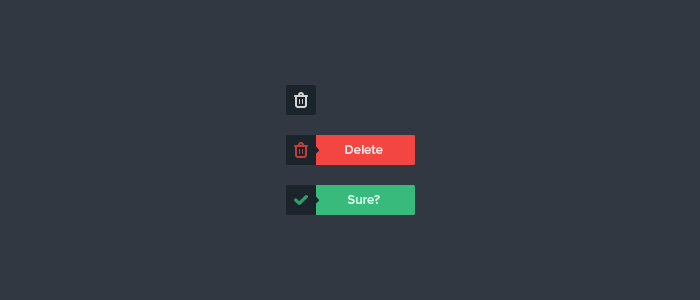
<style>
.page{position:relative;width:700px;height:300px;background:#313841}
.page>*{position:absolute;margin:0}
.t1{font:13.3px "ProximaNova-Semibold";color:#ffe5e4}
.t2{font:13.3px "ProximaNova-Semibold";color:#ceffe8}
</style>
<div class="page">
<p class="t1" style="left:345px;top:145px;width:38px;height:9px">Delete</p>
<p class="t2" style="left:347px;top:195px;width:33px;height:9px">Sure?</p>
</div>
